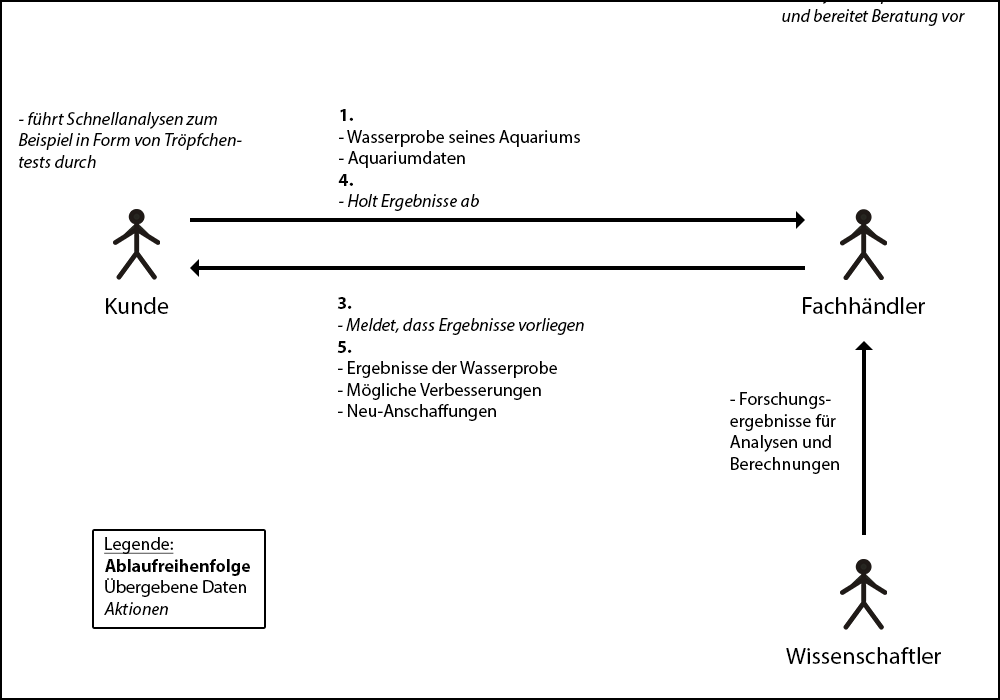
<style>
.page{position:relative;width:1000px;height:700px;background:#ffffff}
.page>*{position:absolute;margin:0}
.t1{font:18px "MyriadPro-It";color:#000000}
.t2{font:18px "MyriadPro-Regular";color:#000000}
.t3{font:18px "MyriadPro-Bold";color:#000000}
.t4{font:23.9px "MyriadPro-Regular";color:#000000}
.t5{font:24px "MyriadPro-Regular";color:#000000}
.t6{font:18px "MyriadPro-Regular";color:#000000;text-decoration:underline}
</style>
<div class="page">
<p class="t1" style="left:18px;top:112px;width:224px;height:56px">- führt Schnellanalysen zum<br>Beispiel in Form von Tröpfchen-<br>tests durch</p>
<p class="t2" style="left:338px;top:109px;width:242px;height:102px"><span class="t3">1. <br></span>- Wasserprobe seines Aquariums<br>- Aquariumdaten<br><span class="t3">4.<br></span><span class="t1">- Holt Ergebnisse ab</span></p>
<p class="t4" style="left:106px;top:297px;width:63px;height:17px">Kunde</p>
<p class="t2" style="left:337px;top:297px;width:247px;height:124px"><span class="t3">3.<br></span><span class="t1">- Meldet, dass Ergebnisse vorliegen<br></span><span class="t3">5.<br></span>- Ergebnisse der Wasserprobe<br>- Mögliche Verbesserungen<br>- Neu-Anschaffungen</p>
<p class="t5" style="left:803px;top:297px;width:122px;height:17px">Fachhändler</p>
<p class="t2" style="left:730px;top:392px;width:109px;height:82px">- Forschungs-<br>ergebnisse für <br>Analysen und <br>Berechnungen</p>
<p class="t3" style="left:104px;top:537px;width:146px;height:78px"><span class="t6">Legende:<br></span>Ablaufreihenfolge<br><span class="t2">Übergebene Daten<br></span><span class="t1">Aktionen</span></p>
<p class="t4" style="left:786px;top:647px;width:155px;height:17px">Wissenschaftler</p>
</div>
